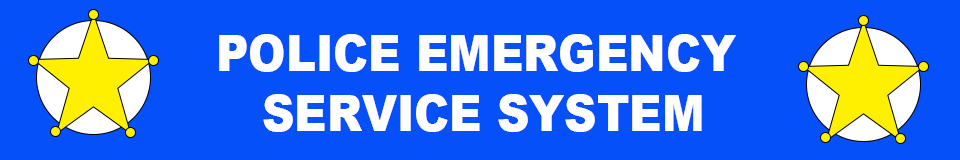
<style>
.page{position:relative;width:960px;height:160px;background:#0550f9}
.page>*{position:absolute;margin:0}
.t1{font:50px "Arial-Black";color:#ffffff;scale:0.9 1}
</style>
<div class="page">
<p class="t1" style="left:219px;top:34px;width:517px;height:98px;text-align:center">POLICE EMERGENCY <br>SERVICE SYSTEM</p>
</div>
